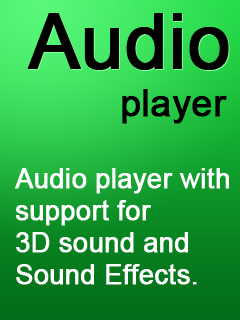
<style>
.page{position:relative;width:240px;height:320px}
.page>*{position:absolute;margin:0}
.t1{font:75.6px "ArialMT";color:#000000;font-weight:bold}
.t2{font:36.8px "ArialMT";color:#000000;font-weight:bold}
.t3{font:26.7px "ArialMT";color:#ffffff;font-weight:bold}
</style>
<div class="page">
<p class="t1" style="left:27px;top:13px;width:202px;height:57px">Audio</p>
<p class="t2" style="left:122px;top:89px;width:105px;height:35px">player</p>
<p class="t3" style="left:15px;top:168px;width:214px;height:117px">Audio player with<br>support for<br>3D sound and<br>Sound Effects.</p>
</div>
